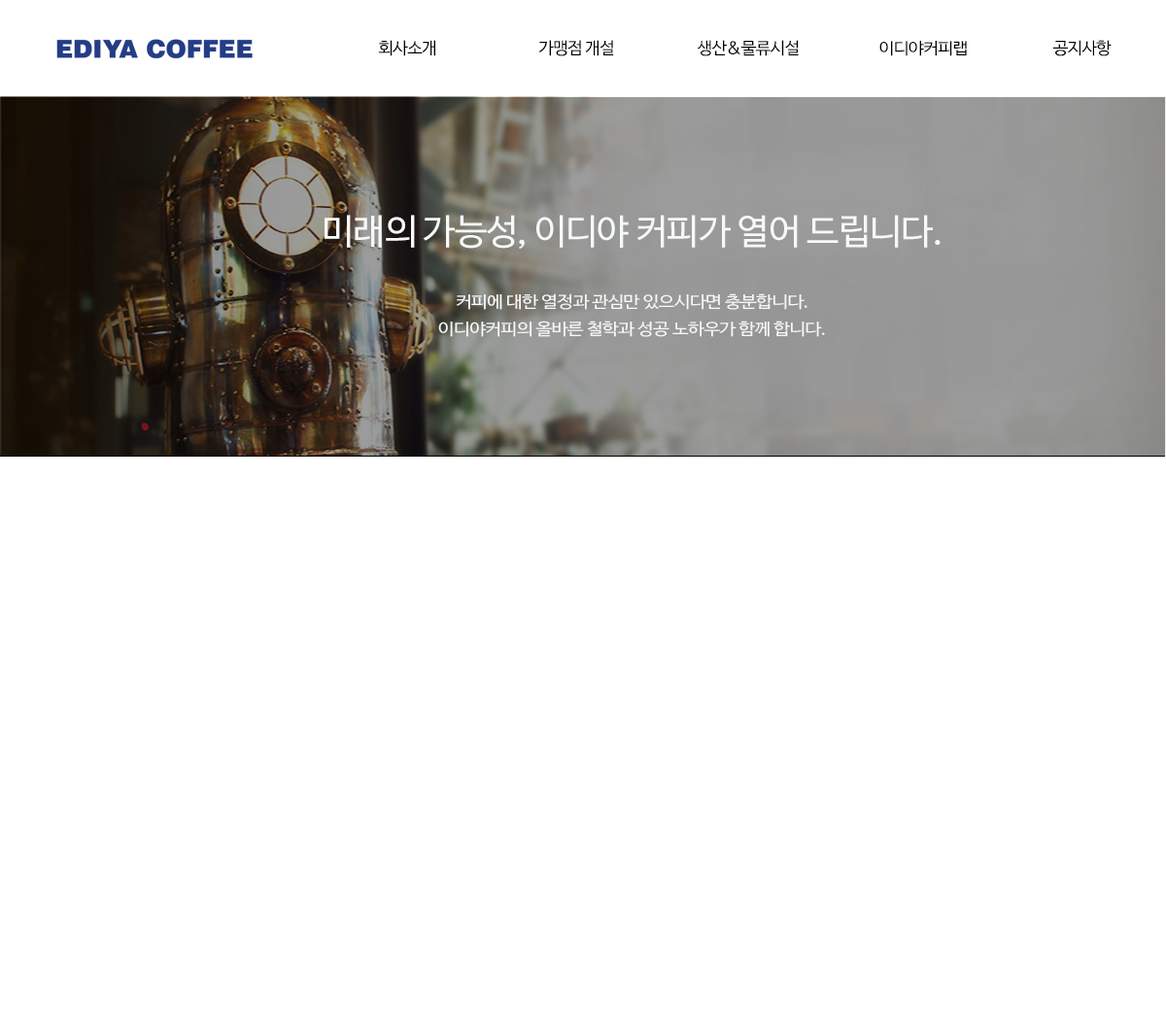
<style>
.page{position:relative;width:1166px;height:1023px;background:#ffffff}
.page>*{position:absolute;margin:0}
.t1{font:16.8px "NanumBarunGothic";letter-spacing:-0.05em;color:#000000;scale:1.03 1}
.t2{font:15.9px "NanumBarunGothic";letter-spacing:-0.05em;color:#000000;scale:1.1 1}
.t3{font:16.8px "NanumBarunGothic";letter-spacing:-0.05em;color:#000000}
.t4{font:35.3px "NanumBarunGothic";letter-spacing:-0.025em;color:#f7f8fa}
.t5{font:16.3px/27.1px "NanumBarunGothic";letter-spacing:-0.025em;color:#f7f8fa;scale:1.11 1}
.t6{font:16.3px "NanumBarunGothic";letter-spacing:-0.025em;color:#f7f8fa;scale:1.11 1}
</style>
<div class="page">
<p class="t1" style="left:378px;top:40px;width:57px;height:16px">회사소개</p>
<p class="t1" style="left:538px;top:40px;width:76px;height:16px">가맹점 개설</p>
<p class="t1" style="left:697px;top:40px;width:102px;height:16px">생산&amp;물류시설</p>
<p class="t2" style="left:879px;top:41px;width:88px;height:15px">이디야커피랩</p>
<p class="t3" style="left:1052px;top:40px;width:59px;height:16px">공지사항</p>
<p class="t4" style="left:324px;top:215px;width:616px;height:34px">미래의 가능성, 이디야 커피가 열어 드립니다.</p>
<p class="t5" style="left:438px;top:293px;width:387px;height:44px;text-align:center"><span class="t6">커피에 대한 열정과 관심만 있으시다면 충분합니다.<br></span>이디야커피의 올바른 철학과 성공 노하우가 함께 합니다.</p>
</div>
